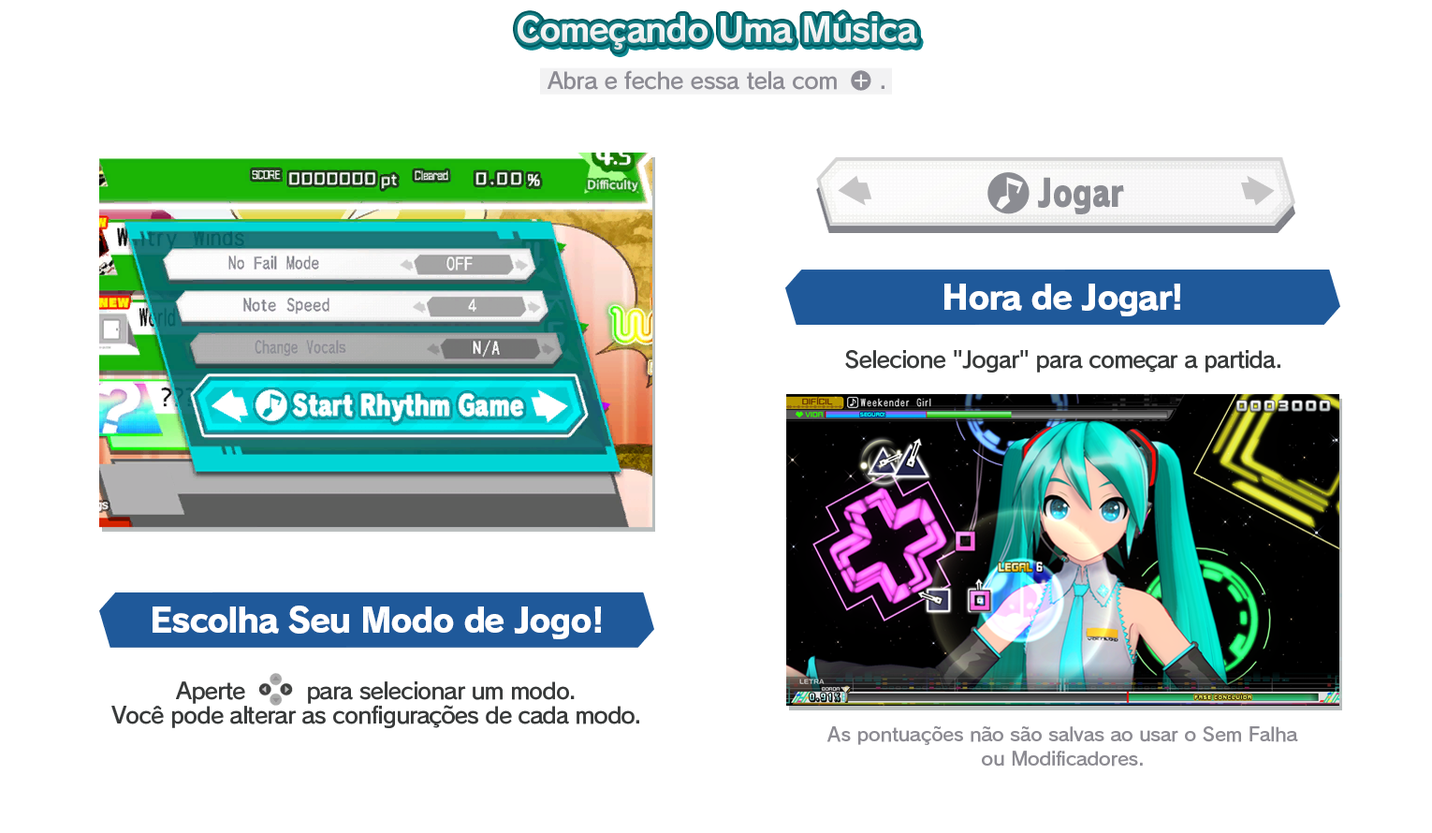
<style>
.page{position:relative;width:1432px;height:833px;background:#ffffff}
.page>*{position:absolute;margin:0}
.t1{font:33.7px "RodinPro-B";letter-spacing:-0.039em;color:#f2f2f3}
.t2{font:22.5px "RodinPro-DB";letter-spacing:-0.025em;color:#8c8b93}
.t3{font:33.7px "RodinPro-EB";letter-spacing:-0.048em;color:#ffffff}
.t4{font:22.5px "RodinPro-DB";letter-spacing:-0.04em;color:#383a3a}
.t5{font:22.5px/23.7px "RodinPro-DB";letter-spacing:-0.04em;color:#383a3a}
.t6{font:18.7px/23.7px "RodinPro-DB";letter-spacing:-0.014em;color:#8c8b92}
</style>
<div class="page">
<p class="t1" style="left:517px;top:14px;width:400px;height:36px">Começando Uma Música</p>
<p class="t2" style="left:547px;top:70px;width:290px;height:20px">Abra e feche essa tela com</p>
<p class="t2" style="left:881px;top:85px;width:3px;height:4px">.</p>
<p class="t3" style="left:944px;top:284px;width:236px;height:32px">Hora de Jogar!</p>
<p class="t4" style="left:845px;top:350px;width:435px;height:22px">Selecione "Jogar" para começar a partida.</p>
<p class="t3" style="left:153px;top:605px;width:448px;height:34px">Escolha Seu Modo de Jogo!</p>
<p class="t5" style="left:111px;top:681px;width:528px;height:47px;text-align:center">Aperte         para selecionar um modo.<br>Você pode alterar as configurações de cada modo.</p>
<p class="t6" style="left:827px;top:725px;width:471px;height:41px;text-align:center">As pontuações não são salvas ao usar o Sem Falha<br>ou Modificadores.</p>
</div>
